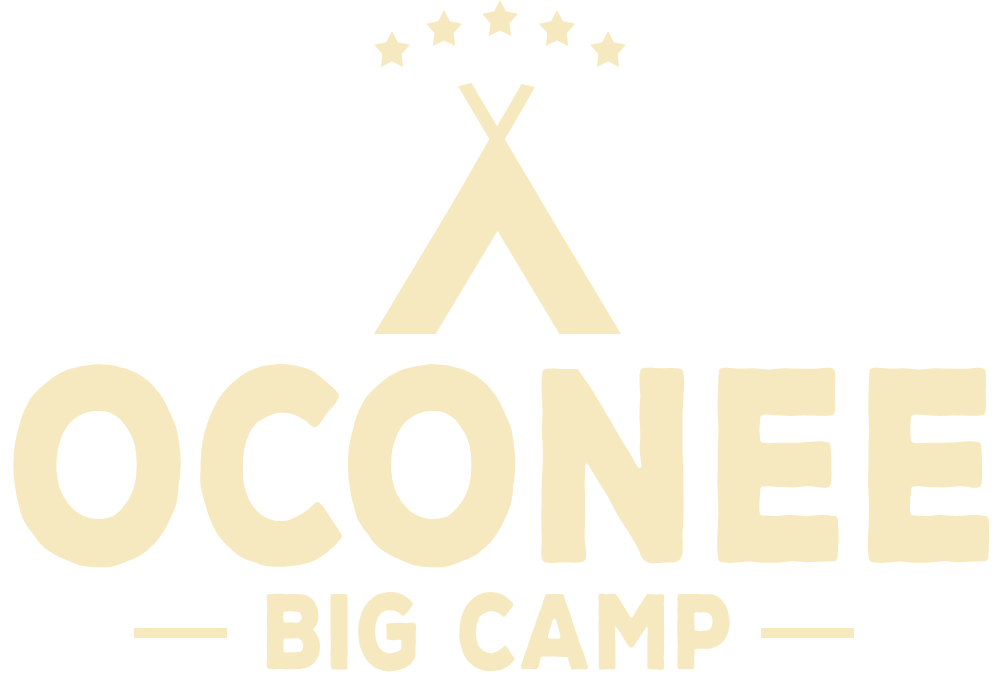
<style>
.page{position:relative;width:1000px;height:674px;background:#ffffff}
.page>*{position:absolute;margin:0}
.t1{font:266.9px "NexaRustSans-Black";color:#f6e9bf;font-weight:bold;scale:0.78 1}
.t2{font:103.8px "NexaRustSans-Black";color:#f6e9bf;font-weight:bold;scale:0.78 1}
</style>
<div class="page">
<p class="t1" style="left:13px;top:363px;width:977px;height:205px">OCONEE</p>
<p class="t2" style="left:266px;top:592px;width:464px;height:80px">Big Camp</p>
</div>
